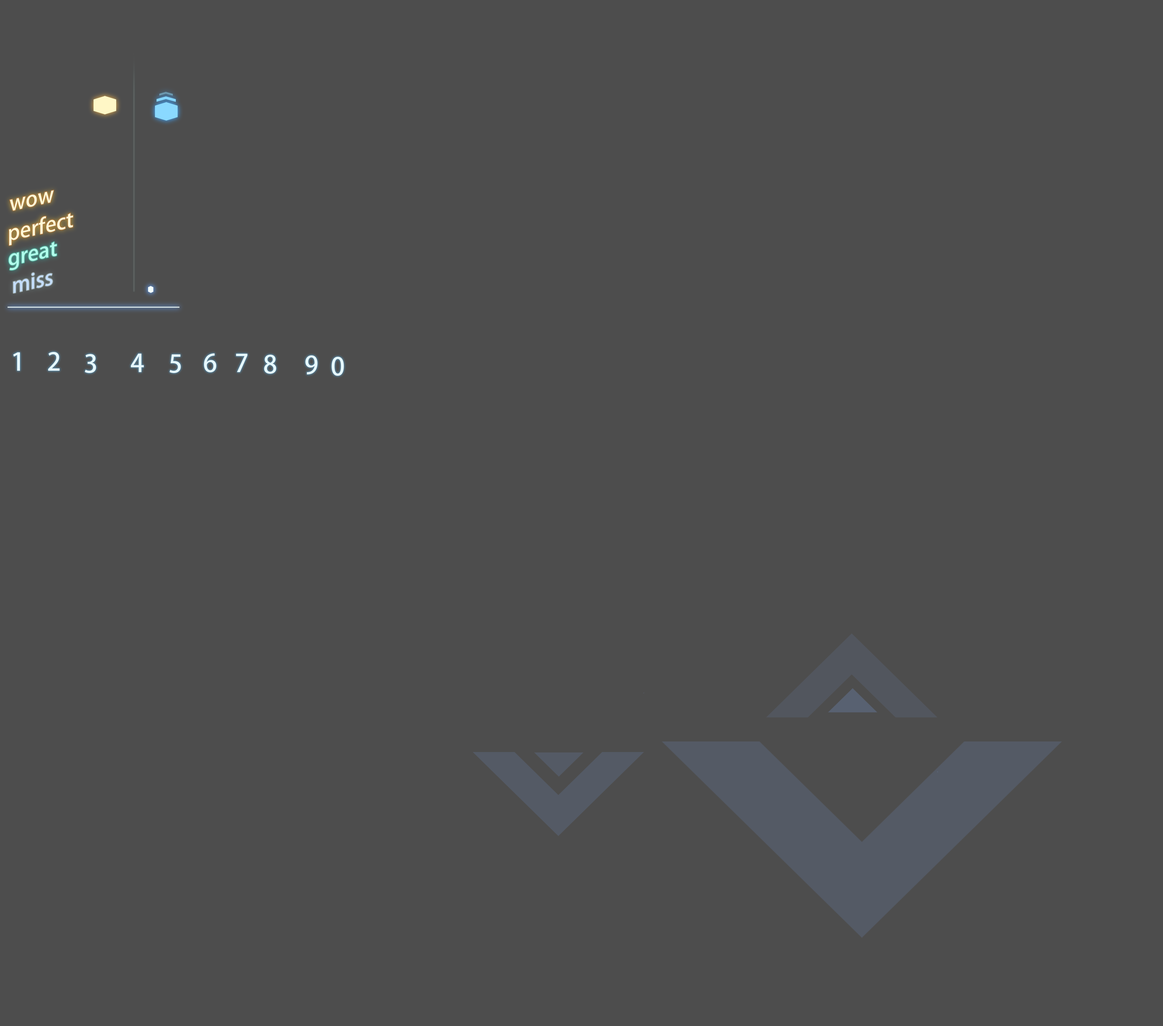
<style>
.page{position:relative;width:1163px;height:1026px;background:#4d4d4d}
.page>*{position:absolute;margin:0}
.t1{font:20.6px "AdobeHeitiStd-Regular";color:#fff9d6}
.t2{font:20.6px "AdobeHeitiStd-Regular";color:#b2ffed}
.t3{font:20.6px "AdobeHeitiStd-Regular";color:#c4deff}
.t4{font:24.5px "AdobeHeitiStd-Regular";color:#f4f4f4}
</style>
<div class="page">
<p class="t1" style="left:10px;top:190px;width:44px;height:21px;rotate:-12deg">wow</p>
<p class="t1" style="left:9px;top:213px;width:64px;height:32px;rotate:-12deg">perfect</p>
<p class="t2" style="left:9px;top:242px;width:48px;height:28px;rotate:-12deg">great</p>
<p class="t3" style="left:13px;top:272px;width:39px;height:21px;rotate:-12deg">miss</p>
<p class="t4" style="left:13px;top:352px;width:7px;height:19px">1</p>
<p class="t4" style="left:48px;top:352px;width:12px;height:19px">2</p>
<p class="t4" style="left:85px;top:354px;width:11px;height:19px">3</p>
<p class="t4" style="left:131px;top:353px;width:13px;height:19px">4</p>
<p class="t4" style="left:204px;top:353px;width:12px;height:19px">6</p>
<p class="t4" style="left:236px;top:353px;width:11px;height:19px">7</p>
<p class="t4" style="left:169px;top:354px;width:12px;height:19px">5</p>
<p class="t4" style="left:264px;top:354px;width:12px;height:20px">8</p>
<p class="t4" style="left:305px;top:355px;width:12px;height:19px">9</p>
<p class="t4" style="left:332px;top:357px;width:12px;height:19px">0</p>
</div>
